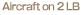
<style>
.page{position:relative;width:84px;height:15px;background:#ffffff}
.page>*{position:absolute;margin:0}
.t1{font:10px "GothicMB101Pro-DeBold";letter-spacing:-0.08em;color:#8b6e51}
</style>
<div class="page">
<p class="t1" style="left:2px;top:2px;width:78px;height:9px;opacity:0.9">Aircraft on 2 LB</p>
</div>
